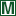
<style>
.page{position:relative;width:16px;height:16px;background:#11572a}
.page>*{position:absolute;margin:0}
.t1{font:8.6px "Helvetica-Bold";color:#11572a}
</style>
<div class="page">
<p class="t1" style="left:2px;top:1px;width:12px;height:13px">M</p>
</div>
